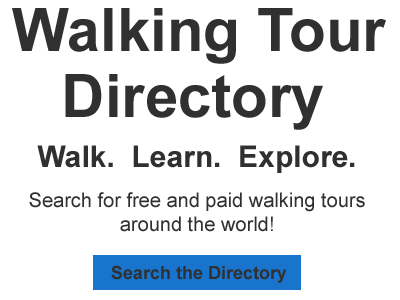
<style>
.page{position:relative;width:400px;height:300px;background:#ffffff}
.page>*{position:absolute;margin:0}
.t1{font:60px "Arial-BoldMT";color:#303030}
.t2{font:30px "Arial-BoldMT";color:#303030}
.t3{font:20px "ArialMT";color:#303030}
.t4{font:18px "Arial-BoldMT";color:#303030}
</style>
<div class="page">
<p class="t1" style="left:12px;top:8px;width:374px;height:56px">Walking Tour</p>
<p class="t1" style="left:65px;top:74px;width:258px;height:56px">Directory</p>
<p class="t2" style="left:37px;top:145px;width:318px;height:28px">Walk.  Learn.  Explore.</p>
<p class="t3" style="left:29px;top:192px;width:336px;height:40px;text-align:center">Search for free and paid walking tours<br>around the world!</p>
<p class="t4" style="left:111px;top:265px;width:176px;height:18px">Search the Directory</p>
</div>
